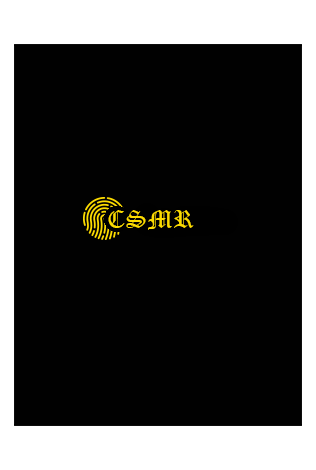
<style>
.page{position:relative;width:316px;height:470px;background:#010101}
.page>*{position:absolute;margin:0}
.t1{font:24px "OldEnglishTextMT";letter-spacing:0.075em;color:#fcdb00;text-transform:uppercase}
</style>
<div class="page">
<p class="t1" style="left:108px;top:210px;width:86px;height:20px">CSMR</p>
</div>
